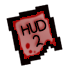
<style>
.page{position:relative;width:70px;height:70px;background:#ffffff}
.page>*{position:absolute;margin:0}
.t1{font:18px "KidSans";color:#000000;font-weight:bold}
</style>
<div class="page">
<p class="t1" style="left:20px;top:19px;width:27px;height:17px;rotate:-15deg">HUD</p>
<p class="t1" style="left:32px;top:35px;width:12px;height:12px;rotate:-15deg">2</p>
</div>
